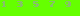
<style>
.page{position:relative;width:80px;height:16px;background:#65ff00}
.page>*{position:absolute;margin:0}
.t1{font:8px "Early-GameBoy";color:#86c06c}
</style>
<div class="page">
<p class="t1" style="left:2px;top:1px;width:69px;height:6px">1  3  5  7  9</p>
</div>
